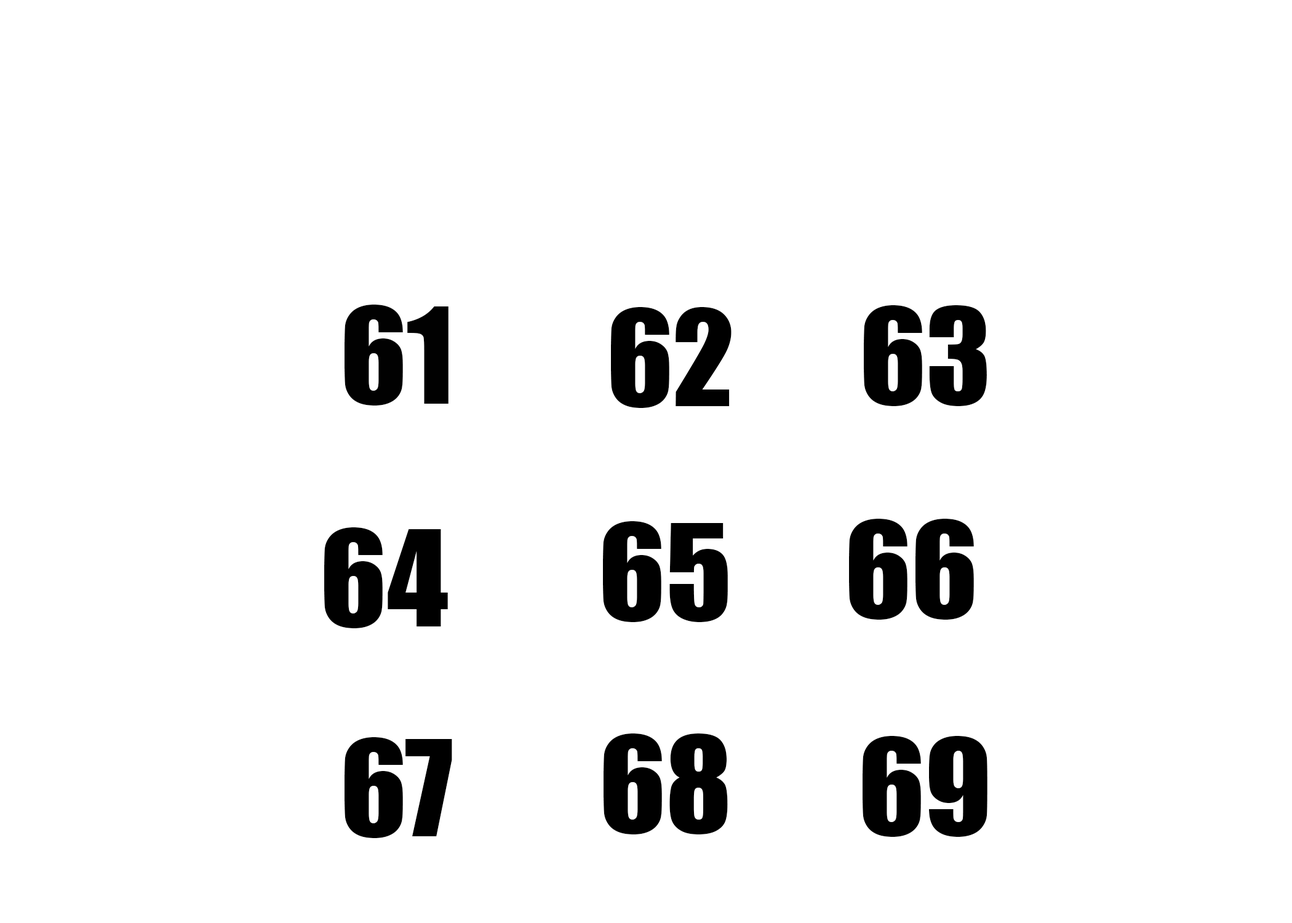
<style>
.page{position:relative;width:1292px;height:923px;background:#ffffff}
.page>*{position:absolute;margin:0}
.t1{font:123.1px "Impact";color:#010101}
.t2{font:123.1px "Impact";color:#000000}
</style>
<div class="page">
<p class="t1" style="left:345px;top:305px;width:104px;height:100px">61</p>
<p class="t2" style="left:864px;top:305px;width:123px;height:101px">63</p>
<p class="t2" style="left:611px;top:307px;width:121px;height:101px">62</p>
<p class="t2" style="left:603px;top:521px;width:125px;height:101px">65</p>
<p class="t2" style="left:849px;top:519px;width:125px;height:101px">66</p>
<p class="t2" style="left:324px;top:527px;width:124px;height:101px">64</p>
<p class="t2" style="left:345px;top:737px;width:107px;height:101px">67</p>
<p class="t2" style="left:604px;top:733px;width:124px;height:101px">68</p>
<p class="t2" style="left:863px;top:736px;width:124px;height:101px">69</p>
</div>
